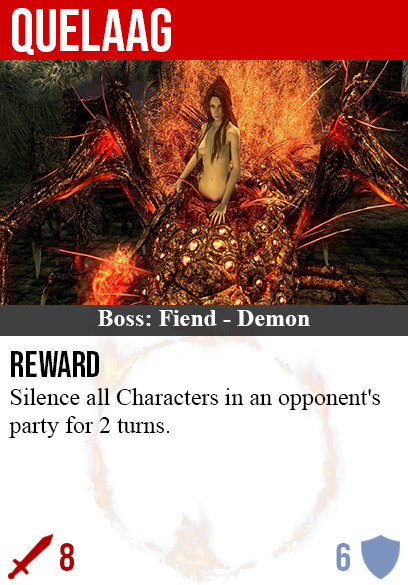
<style>
.page{position:relative;width:408px;height:585px;background:#ffffff}
.page>*{position:absolute;margin:0}
.t1{font:60px "BebasNeue-Regular";color:#ffffff}
.t2{font:24px "TimesNewRomanPS-BoldMT";color:#ffffff}
.t3{font:36px "BebasNeue-Regular";color:#000000}
.t4{font:24px "TimesNewRomanPSMT";color:#000000}
.t5{font:40px "BebasNeue-Regular";color:#af0202}
.t6{font:40px "BebasNeue-Regular";color:#7c94bd}
</style>
<div class="page">
<p class="t1" style="left:12px;top:8px;width:159px;height:47px">quelaag</p>
<p class="t2" style="left:98px;top:310px;width:212px;height:16px">Boss: Fiend - Demon</p>
<p class="t3" style="left:11px;top:351px;width:88px;height:26px">reward</p>
<p class="t4" style="left:9px;top:388px;width:371px;height:50px">Silence all Characters in an opponent's<br>party for 2 turns.</p>
<p class="t5" style="left:60px;top:543px;width:14px;height:28px">8</p>
<p class="t6" style="left:336px;top:543px;width:14px;height:28px">6</p>
</div>
